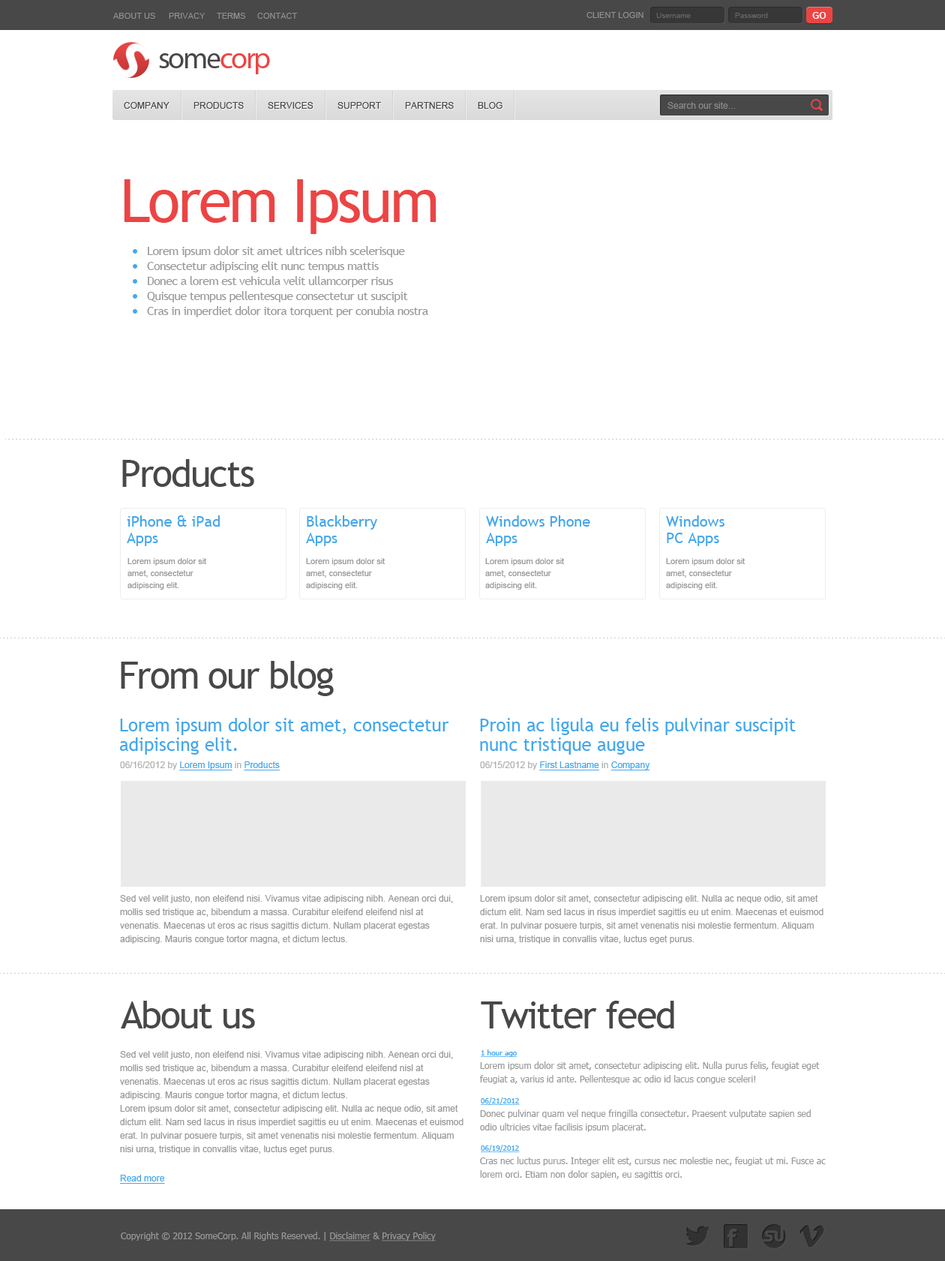
<style>
.page{position:relative;width:945px;height:1261px;background:#ffffff}
.page>*{position:absolute;margin:0}
.t1{font:8.3px "ArialMT";color:#919191;text-transform:uppercase}
.t2{font:7.5px "ArialMT";color:#666666}
.t3{font:9px "Arial-BoldMT";color:#ffffff;text-transform:uppercase}
.t4{font:9px "ArialMT";color:#484848;text-transform:uppercase}
.t5{font:9px "ArialMT";color:#8a8a8a}
.t6{font:60px "TrebuchetMS";letter-spacing:-0.04em;color:#ec4444}
.t7{font:12px/15px "TrebuchetMS";letter-spacing:-0.04em;color:#999999}
.t8{font:37.5px "TrebuchetMS";letter-spacing:-0.04em;color:#484848}
.t9{font:15px/16.5px "TrebuchetMS";color:#44a7ec}
.t10{font:8.3px/12px "ArialMT";color:#999999}
.t11{font:18px/19.5px "TrebuchetMS";color:#44a7ec}
.t12{font:9px "ArialMT";color:#aeaeae}
.t13{font:9px "ArialMT";color:#44a7ec;text-decoration:underline}
.t14{font:9px/13.5px "ArialMT";color:#999999}
.t15{font:7.5px "Tahoma";color:#44a7ec;text-decoration:underline}
.t16{font:9px/13.5px "Tahoma";color:#999999}
.t17{font:9px "Tahoma";color:#999999}
.t18{font:9px "Tahoma";color:#999999;text-decoration:underline}
</style>
<div class="page">
<p class="t1" style="left:113px;top:13px;width:42px;height:6px">About Us</p>
<p class="t1" style="left:169px;top:13px;width:37px;height:6px">Privacy</p>
<p class="t1" style="left:217px;top:13px;width:29px;height:6px">Terms</p>
<p class="t1" style="left:257px;top:13px;width:41px;height:6px">Contact</p>
<p class="t1" style="left:587px;top:12px;width:57px;height:6px">Client login</p>
<p class="t2" style="left:657px;top:13px;width:34px;height:5px">Username</p>
<p class="t2" style="left:735px;top:13px;width:33px;height:5px">Password</p>
<p class="t3" style="left:813px;top:12px;width:14px;height:7px">GO</p>
<p class="t4" style="left:124px;top:102px;width:46px;height:7px">Company</p>
<p class="t4" style="left:194px;top:102px;width:50px;height:7px">Products</p>
<p class="t4" style="left:268px;top:102px;width:46px;height:7px">Services</p>
<p class="t4" style="left:338px;top:102px;width:43px;height:7px">support</p>
<p class="t4" style="left:405px;top:102px;width:49px;height:7px">Partners</p>
<p class="t4" style="left:478px;top:102px;width:25px;height:7px">Blog</p>
<p class="t5" style="left:668px;top:102px;width:67px;height:7px">Search our site...</p>
<p class="t6" style="left:124px;top:179px;width:313px;height:55px">Lorem Ipsum</p>
<p class="t7" style="left:147px;top:246px;width:281px;height:71px">Lorem ipsum dolor sit amet ultrices nibh scelerisque<br>Consectetur adipiscing elit nunc tempus mattis<br>Donec a lorem est vehicula velit ullamcorper risus<br>Quisque tempus pellentesque consectetur ut suscipit <br>Cras in imperdiet dolor itora torquent per conubia nostra</p>
<p class="t8" style="left:122px;top:459px;width:132px;height:28px">Products</p>
<p class="t9" style="left:127px;top:515px;width:93px;height:31px">iPhone &amp; iPad<br>Apps</p>
<p class="t9" style="left:306px;top:515px;width:71px;height:31px">Blackberry<br>Apps</p>
<p class="t9" style="left:486px;top:515px;width:105px;height:31px">Windows Phone<br>Apps</p>
<p class="t9" style="left:666px;top:515px;width:59px;height:31px">Windows<br>PC Apps</p>
<p class="t10" style="left:128px;top:558px;width:78px;height:32px">Lorem ipsum dolor sit<br>amet, consectetur<br>adipiscing elit.</p>
<p class="t10" style="left:306px;top:558px;width:79px;height:32px">Lorem ipsum dolor sit<br>amet, consectetur<br>adipiscing elit.</p>
<p class="t10" style="left:485px;top:558px;width:79px;height:32px">Lorem ipsum dolor sit<br>amet, consectetur<br>adipiscing elit.</p>
<p class="t10" style="left:666px;top:558px;width:79px;height:32px">Lorem ipsum dolor sit<br>amet, consectetur<br>adipiscing elit.</p>
<p class="t8" style="left:121px;top:661px;width:213px;height:35px">From our blog</p>
<p class="t11" style="left:119px;top:718px;width:330px;height:37px">Lorem ipsum dolor sit amet, consectetur<br>adipiscing elit.</p>
<p class="t11" style="left:480px;top:718px;width:316px;height:37px">Proin ac ligula eu felis pulvinar suscipit<br>nunc tristique augue</p>
<p class="t12" style="left:120px;top:762px;width:160px;height:9px">06/16/2012 by <span class="t13">Lorem Ipsum</span> in <span class="t13">Products</span></p>
<p class="t13" style="left:480px;top:762px;width:171px;height:9px"><span class="t12">06/15/2012 by </span>First Lastname<span class="t12"> in </span>Company</p>
<p class="t14" style="left:120px;top:895px;width:333px;height:49px">Sed vel velit justo, non eleifend nisi. Vivamus vitae adipiscing nibh. Aenean orci dui, mollis sed tristique ac, bibendum a massa. Curabitur eleifend eleifend nisl at venenatis. Maecenas ut eros ac risus sagittis dictum. Nullam placerat egestas adipiscing. Mauris congue tortor magna, et dictum lectus.</p>
<p class="t14" style="left:480px;top:895px;width:344px;height:49px">Lorem ipsum dolor sit amet, consectetur adipiscing elit. Nulla ac neque odio, sit amet dictum elit. Nam sed lacus in risus imperdiet sagittis eu ut enim. Maecenas et euismod erat. In pulvinar posuere turpis, sit amet venenatis nisi molestie fermentum. Aliquam nisi urna, tristique in convallis vitae, luctus eget purus.</p>
<p class="t8" style="left:121px;top:1001px;width:134px;height:28px">About us</p>
<p class="t8" style="left:481px;top:1001px;width:194px;height:28px">Twitter feed</p>
<p class="t15" style="left:481px;top:1050px;width:37px;height:7px">1 hour ago</p>
<p class="t14" style="left:120px;top:1051px;width:344px;height:103px">Sed vel velit justo, non eleifend nisi. Vivamus vitae adipiscing nibh. Aenean orci dui, mollis sed tristique ac, bibendum a massa. Curabitur eleifend eleifend nisl at venenatis. Maecenas ut eros ac risus sagittis dictum. Nullam placerat egestas adipiscing. Mauris congue tortor magna, et dictum lectus.<br>Lorem ipsum dolor sit amet, consectetur adipiscing elit. Nulla ac neque odio, sit amet dictum elit. Nam sed lacus in risus imperdiet sagittis eu ut enim. Maecenas et euismod erat. In pulvinar posuere turpis, sit amet venenatis nisi molestie fermentum. Aliquam nisi urna, tristique in convallis vitae, luctus eget purus.</p>
<p class="t16" style="left:480px;top:1062px;width:340px;height:22px">Lorem ipsum dolor sit amet, consectetur adipiscing elit. Nulla purus felis, feugiat eget feugiat a, varius id ante. Pellentesque ac odio id lacus congue sceleri!</p>
<p class="t15" style="left:481px;top:1098px;width:39px;height:7px">06/21/2012</p>
<p class="t16" style="left:480px;top:1110px;width:331px;height:22px">Donec pulvinar quam vel neque fringilla consectetur. Praesent vulputate sapien sed odio ultricies vitae facilisis ipsum placerat.</p>
<p class="t15" style="left:481px;top:1145px;width:39px;height:7px">06/19/2012</p>
<p class="t16" style="left:480px;top:1157px;width:346px;height:23px">Cras nec luctus purus. Integer elit est, cursus nec molestie nec, feugiat ut mi. Fusce ac lorem orci. Etiam non dolor sapien, eu sagittis orci.</p>
<p class="t13" style="left:120px;top:1175px;width:45px;height:9px">Read more</p>
<p class="t17" style="left:121px;top:1232px;width:315px;height:10px">Copyright © 2012 SomeCorp. All Rights Reserved. | <span class="t18">Disclaimer</span> &amp; <span class="t18">Privacy Policy</span></p>
</div>
